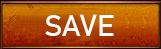
<style>
.page{position:relative;width:161px;height:49px}
.page>*{position:absolute;margin:0}
.t1{font:30px "Bahnschrift";color:#ffffff}
</style>
<div class="page">
<p class="t1" style="left:45px;top:14px;width:69px;height:22px">SAVE</p>
</div>
